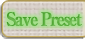
<style>
.page{position:relative;width:85px;height:39px}
.page>*{position:absolute;margin:0}
.t1{font:18px "RyuminPro-ExBold";letter-spacing:-0.12em;color:#5fb143;font-weight:bold;scale:0.9 1}
</style>
<div class="page">
<p class="t1" style="left:6px;top:12px;width:76px;height:14px">Save Preset</p>
</div>
